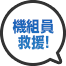
<style>
.page{position:relative;width:66px;height:66px;background:#ffffff}
.page>*{position:absolute;margin:0}
.t1{font:15px/16px "UDShinGoPro-Bold";color:#1c68bb;scale:0.9 1}
</style>
<div class="page">
<p class="t1" style="left:12px;top:19px;width:42px;height:31px;text-align:center">機組員<br>救援!</p>
</div>
